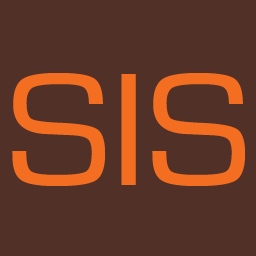
<style>
.page{position:relative;width:256px;height:256px;background:#513127}
.page>*{position:absolute;margin:0}
.t1{font:167.4px "EurostileRegular";color:#f36e21;scale:1.1 1}
</style>
<div class="page">
<p class="t1" style="left:12px;top:73px;width:234px;height:113px">SIS</p>
</div>
